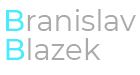
<style>
.page{position:relative;width:140px;height:75px;background:#ffffff}
.page>*{position:absolute;margin:0}
.t1{font:29.2px "Montserrat-Regular";color:#aaaaaa}
.t2{font:29.2px "Montserrat-Medium";color:#49ecff}
</style>
<div class="page">
<p class="t1" style="left:6px;top:9px;width:130px;height:22px"><span class="t2">B</span>ranislav</p>
<p class="t1" style="left:6px;top:38px;width:95px;height:22px"><span class="t2">B</span>lazek</p>
</div>
